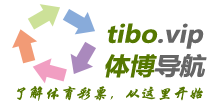
<style>
.page{position:relative;width:224px;height:105px;background:#ffffff}
.page>*{position:absolute;margin:0}
.t1{font:23.9px "MicrosoftYaHei-Bold";color:#557800;font-style:italic;scale:1.05 1}
.t2{font:23.9px "MicrosoftYaHei-Bold";color:#666666;font-style:italic;scale:1.05 1}
.t3{font:23.9px "MicrosoftYaHei-Bold";color:#557700;font-style:italic;scale:1.05 1}
.t4{font:15.2px "STXingkai";color:#557700;font-style:italic;scale:1.05 1}
</style>
<div class="page">
<p class="t1" style="left:107px;top:23px;width:97px;height:26px">tibo<span class="t2">.vip</span></p>
<p class="t3" style="left:105px;top:54px;width:102px;height:24px">体博<span class="t2">导航</span></p>
<p class="t4" style="left:17px;top:86px;width:186px;height:15px">了解体育彩票，从这里开始</p>
</div>
